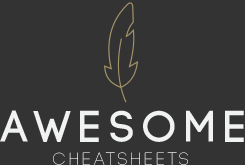
<style>
.page{position:relative;width:245px;height:165px;background:#333333}
.page>*{position:absolute;margin:0}
.t1{font:43.9px "Code-Bold";letter-spacing:0.2em;color:#f1f2f2}
.t2{font:17.6px "Code-Light";letter-spacing:0.2em;color:#f1f2f2}
</style>
<div class="page">
<p class="t1" style="left:0px;top:110px;width:244px;height:32px">AWESOME</p>
<p class="t2" style="left:53px;top:152px;width:135px;height:13px">CHEATSHEETS</p>
</div>
